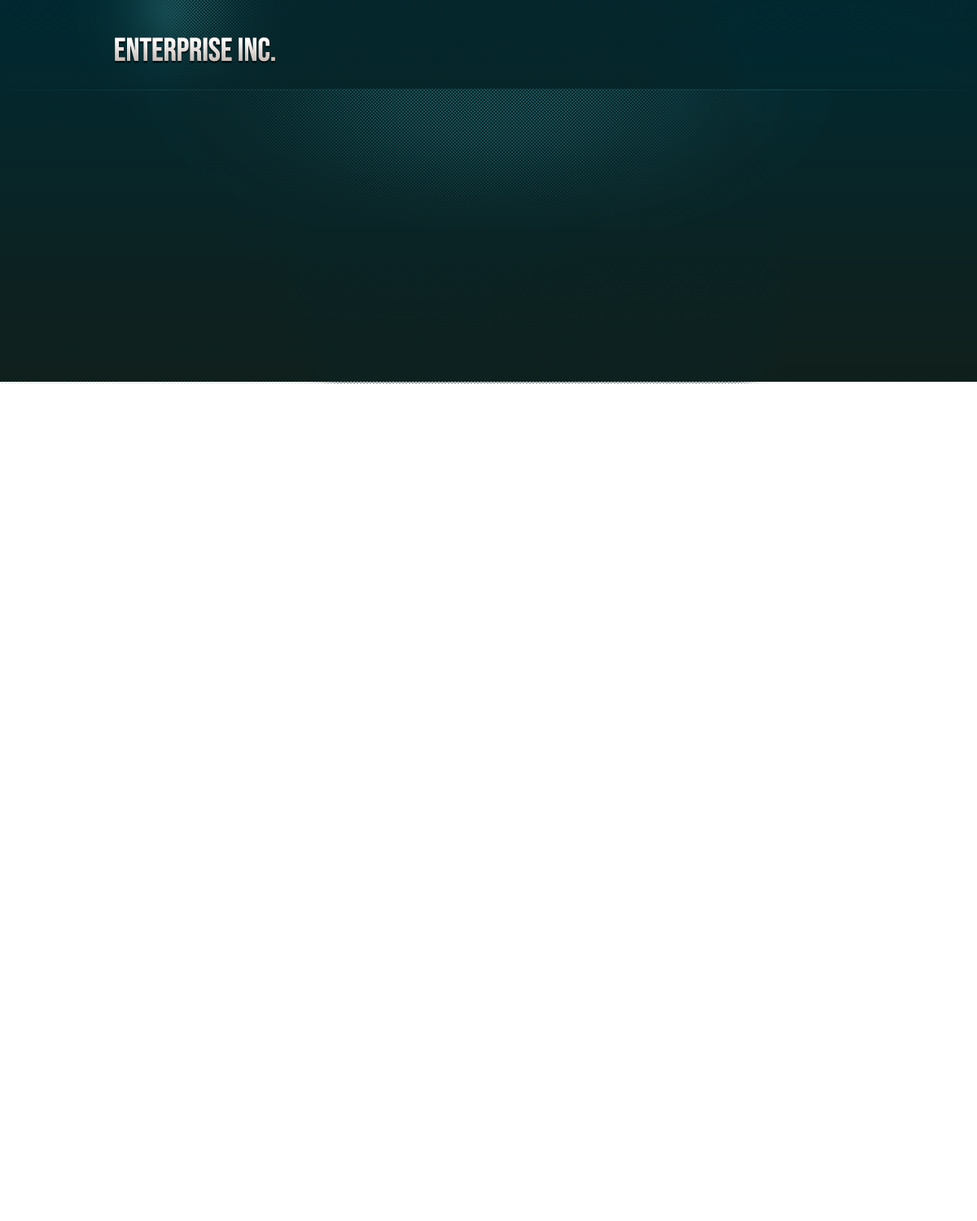
<style>
.page{position:relative;width:977px;height:1221px;background:#ffffff}
.page>*{position:absolute;margin:0}
.t1{font:32.6px "BebasNeue-Regular"}
</style>
<div class="page">
<p class="t1" style="left:115px;top:37px;width:160px;height:25px">Enterprise Inc.</p>
</div>
